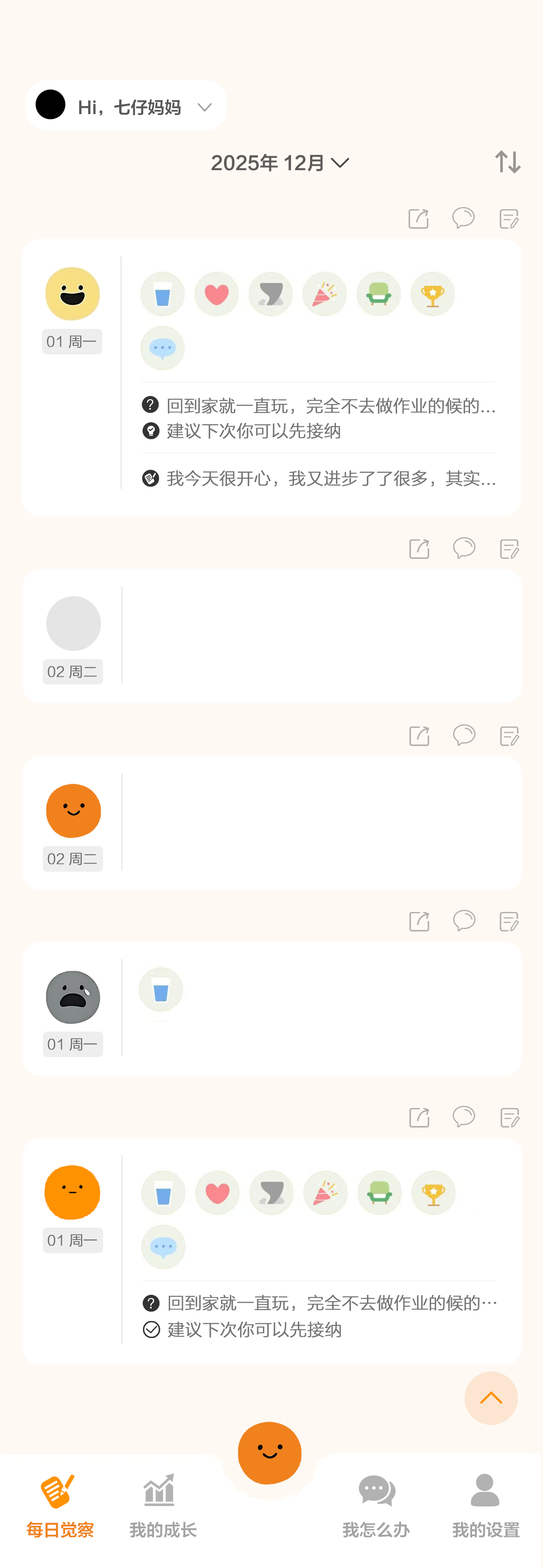
<style>
.page{position:relative;width:543px;height:1568px;background:#ffffff}
.page>*{position:absolute;margin:0}
.t1{font:17px "FZLTZCHK--GBK1-0";color:#585858}
.t2{font:18.5px "FZLTZCHK--GBK1-0";color:#5e5b59}
.t3{font:13.8px "FZLTKHK--GBK1-0";color:#6b6b6b;font-weight:bold}
.t4{font:17px "FZLTKHK--GBK1-0";color:#737373;font-weight:bold}
.t5{font:17px "FZLTZCHK--GBK1-0";color:#f0811d}
.t6{font:17px "FZLTZCHK--GBK1-0";color:#a3a3a3}
</style>
<div class="page">
<p class="t1" style="left:79px;top:99px;width:102px;height:17px">Hi，七仔妈妈</p>
<p class="t2" style="left:211px;top:154px;width:112px;height:17px">2025年 12月</p>
<p class="t3" style="left:47px;top:335px;width:49px;height:13px">01 周一</p>
<p class="t4" style="left:168px;top:398px;width:327px;height:16px">回到家就一直玩，完全不去做作业的候的...</p>
<p class="t4" style="left:167px;top:423px;width:173px;height:16px">建议下次你可以先接纳</p>
<p class="t4" style="left:167px;top:470px;width:328px;height:17px">我今天很开心，我又进步了了很多，其实...</p>
<p class="t3" style="left:48px;top:665px;width:49px;height:13px">02 周二</p>
<p class="t3" style="left:48px;top:853px;width:49px;height:12px">02 周二</p>
<p class="t3" style="left:48px;top:1038px;width:49px;height:13px">01 周一</p>
<p class="t3" style="left:48px;top:1234px;width:49px;height:13px">01 周一</p>
<p class="t4" style="left:168px;top:1295px;width:328px;height:16px">回到家就一直玩，完全不去做作业的候的…</p>
<p class="t4" style="left:168px;top:1321px;width:173px;height:17px">建议下次你可以先接纳</p>
<p class="t5" style="left:27px;top:1521px;width:67px;height:17px">每日觉察</p>
<p class="t6" style="left:130px;top:1522px;width:67px;height:16px">我的成长</p>
<p class="t6" style="left:343px;top:1522px;width:67px;height:16px">我怎么办</p>
<p class="t6" style="left:453px;top:1522px;width:67px;height:16px">我的设置</p>
</div>
